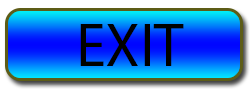
<style>
.page{position:relative;width:250px;height:89px}
.page>*{position:absolute;margin:0}
.t1{font:60.6px "MyriadPro-Regular";color:#000000}
</style>
<div class="page">
<p class="t1" style="left:80px;top:24px;width:104px;height:42px">EXIT</p>
</div>
